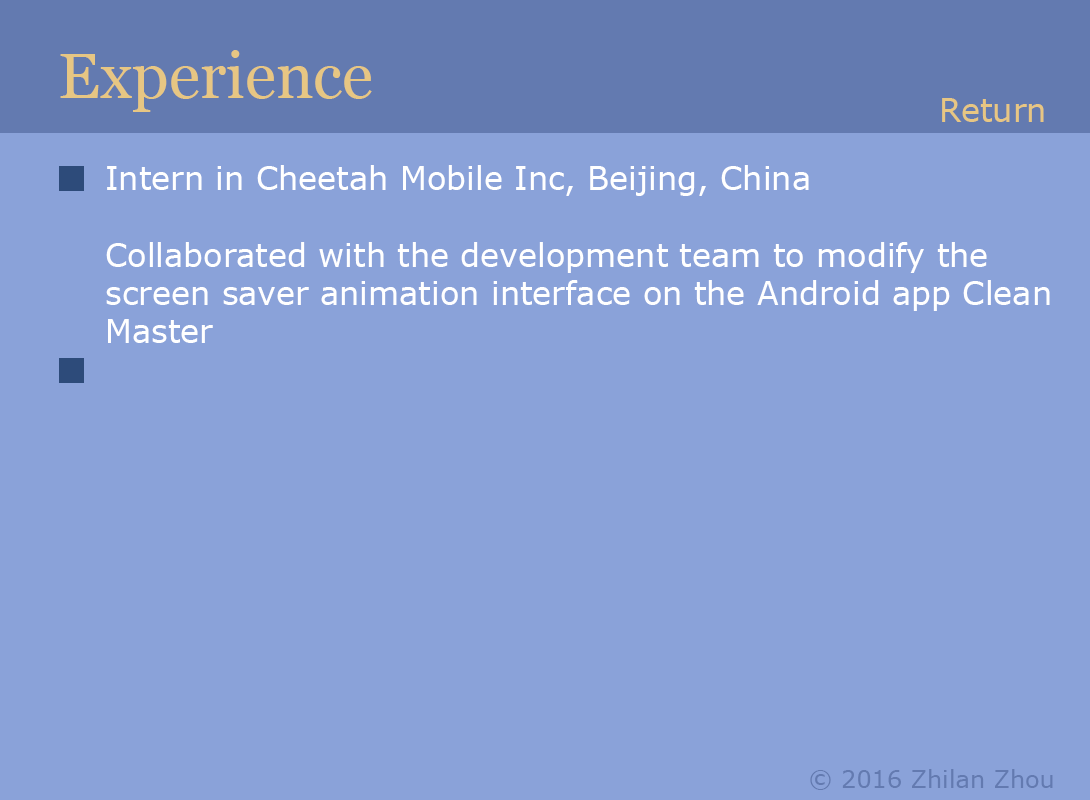
<style>
.page{position:relative;width:1090px;height:800px;background:#8aa2d9}
.page>*{position:absolute;margin:0}
.t1{font:64px "Georgia";color:#e7c683}
.t2{font:32px "Verdana";color:#e7c683}
.t3{font:32px "Verdana";color:#ffffff}
.t4{font:24px "Verdana";color:#637ab0}
</style>
<div class="page">
<p class="t1" style="left:60px;top:50px;width:312px;height:62px">Experience</p>
<p class="t2" style="left:942px;top:98px;width:102px;height:24px">Return</p>
<p class="t3" style="left:106px;top:165px;width:944px;height:178px">Intern in Cheetah Mobile Inc, Beijing, China<br><br>Collaborated with the development team to modify the screen saver animation interface on the Android app Clean Master</p>
<p class="t4" style="left:810px;top:769px;width:243px;height:21px">© 2016 Zhilan Zhou</p>
</div>
